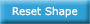
<style>
.page{position:relative;width:90px;height:24px}
.page>*{position:absolute;margin:0}
.t1{font:10.5px "Verdana";color:#ffffff}
</style>
<div class="page">
<p class="t1" style="left:12px;top:6px;width:66px;height:12px">Reset Shape</p>
</div>
